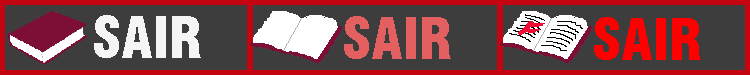
<style>
.page{position:relative;width:750px;height:75px;background:#3d3d3d}
.page>*{position:absolute;margin:0}
.t1{font:56px "Swiss721BT-BlackCondensed";color:#f5f5f5}
.t2{font:56px "Swiss721BT-BlackCondensed";color:#e45f5f}
.t3{font:56px "Swiss721BT-BlackCondensed";color:#ff0000}
</style>
<div class="page">
<p class="t1" style="left:94px;top:15px;width:107px;height:43px">SAIR</p>
<p class="t2" style="left:344px;top:16px;width:107px;height:43px">SAIR</p>
<p class="t3" style="left:594px;top:17px;width:107px;height:43px">SAIR</p>
</div>
